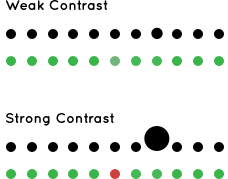
<style>
.page{position:relative;width:228px;height:179px;background:#ffffff}
.page>*{position:absolute;margin:0}
.t1{font:14px "QuicksandBold-Regular";color:#000000}
</style>
<div class="page">
<p class="t1" style="left:6px;top:0px;width:102px;height:10px">Weak Contrast</p>
<p class="t1" style="left:6px;top:113px;width:108px;height:13px">Strong Contrast</p>
</div>
